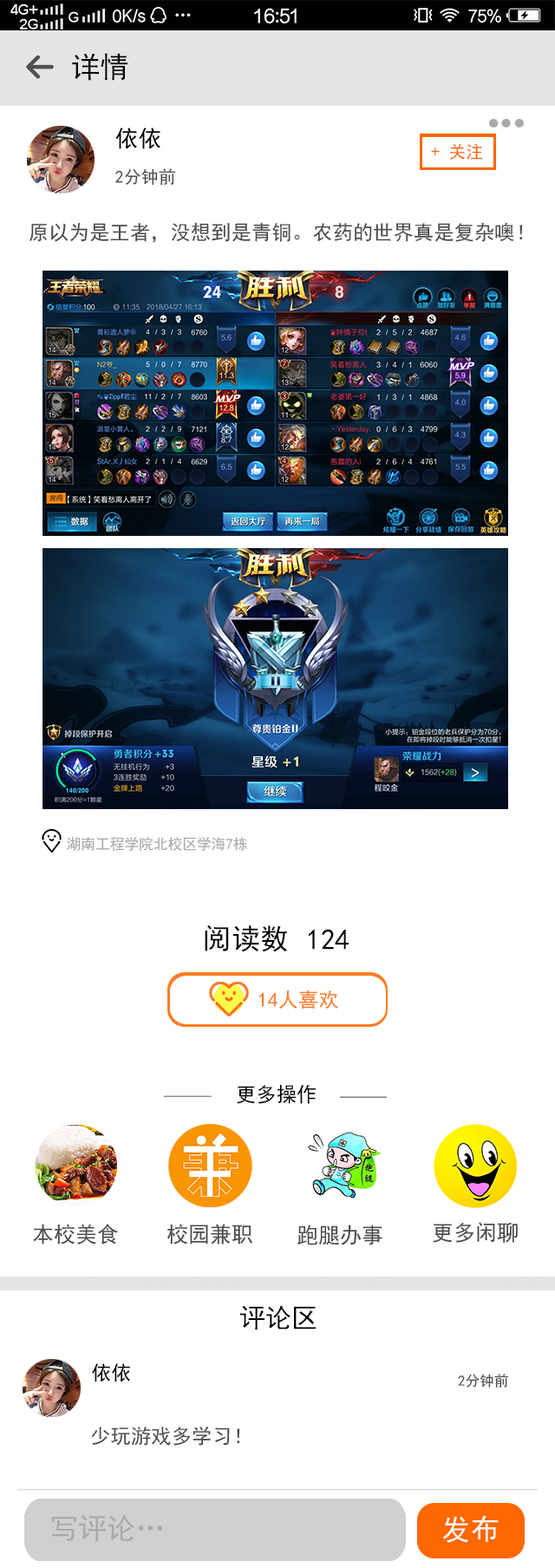
<style>
.page{position:relative;width:555px;height:1568px;background:#ffffff}
.page>*{position:absolute;margin:0}
.t1{font:28.9px "SimHei";letter-spacing:0.002em;color:#000000}
.t2{font:23.1px "SimHei";letter-spacing:0.002em;color:#010101}
.t3{font:10.4px "SimHei";letter-spacing:0.002em;color:#ff6600}
.t4{font:17.3px "SimHei";letter-spacing:0.002em;color:#4b4b4b}
.t5{font:20.2px "SimHei";letter-spacing:0.002em;color:#4b4b4b}
.t6{font:14.5px "SimHei";letter-spacing:0.002em;color:#a9a9a9}
.t7{font:20.2px "SimHei";letter-spacing:0.002em;color:#fc7b24}
.t8{font:20.2px "SimHei";letter-spacing:0.002em;color:#010101}
.t9{font:21.7px "SimHei";letter-spacing:0.002em;color:#4b4b4b}
.t10{font:26px "SimHei";letter-spacing:0.002em;color:#000000}
.t11{font:19.9px "SimHei";letter-spacing:0.002em;color:#010101}
.t12{font:14.5px "SimHei";letter-spacing:0.002em;color:#515151}
.t13{font:28.9px "SimHei";letter-spacing:0.002em;color:#a9a9a9}
.t14{font:28.9px "SimHei";letter-spacing:0.002em;color:#ffffff}
</style>
<div class="page">
<p class="t1" style="left:72px;top:53px;width:55px;height:28px">详情</p>
<p class="t2" style="left:115px;top:127px;width:45px;height:22px">依依</p>
<p class="t3" style="left:431px;top:143px;width:52px;height:17px">+ 关注</p>
<p class="t4" style="left:115px;top:168px;width:61px;height:18px">2分钟前</p>
<p class="t5" style="left:29px;top:222px;width:343px;height:21px">原以为是王者，没想到是青铜。农药的</p>
<p class="t5" style="left:373px;top:222px;width:150px;height:20px">世界真是复杂噢！</p>
<p class="t6" style="left:67px;top:837px;width:180px;height:14px">湖南工程学院北校区学海7栋</p>
<p class="t1" style="left:205px;top:924px;width:83px;height:28px">阅读数</p>
<p class="t1" style="left:309px;top:929px;width:40px;height:21px">124</p>
<p class="t7" style="left:258px;top:990px;width:80px;height:19px">14人喜欢</p>
<p class="t8" style="left:237px;top:1084px;width:80px;height:20px">更多操作</p>
<p class="t9" style="left:33px;top:1224px;width:85px;height:21px">本校美食</p>
<p class="t9" style="left:167px;top:1224px;width:85px;height:21px">校园兼职</p>
<p class="t9" style="left:297px;top:1225px;width:85px;height:20px">跑腿办事</p>
<p class="t9" style="left:433px;top:1222px;width:85px;height:21px">更多闲聊</p>
<p class="t10" style="left:240px;top:1305px;width:77px;height:25px">评论区</p>
<p class="t11" style="left:92px;top:1363px;width:38px;height:19px">依依</p>
<p class="t12" style="left:458px;top:1374px;width:51px;height:14px">2分钟前</p>
<p class="t5" style="left:91px;top:1426px;width:149px;height:20px">少玩游戏多学习！</p>
<p class="t13" style="left:51px;top:1514px;width:111px;height:28px">写评论…</p>
<p class="t14" style="left:442px;top:1515px;width:57px;height:28px">发布</p>
</div>
